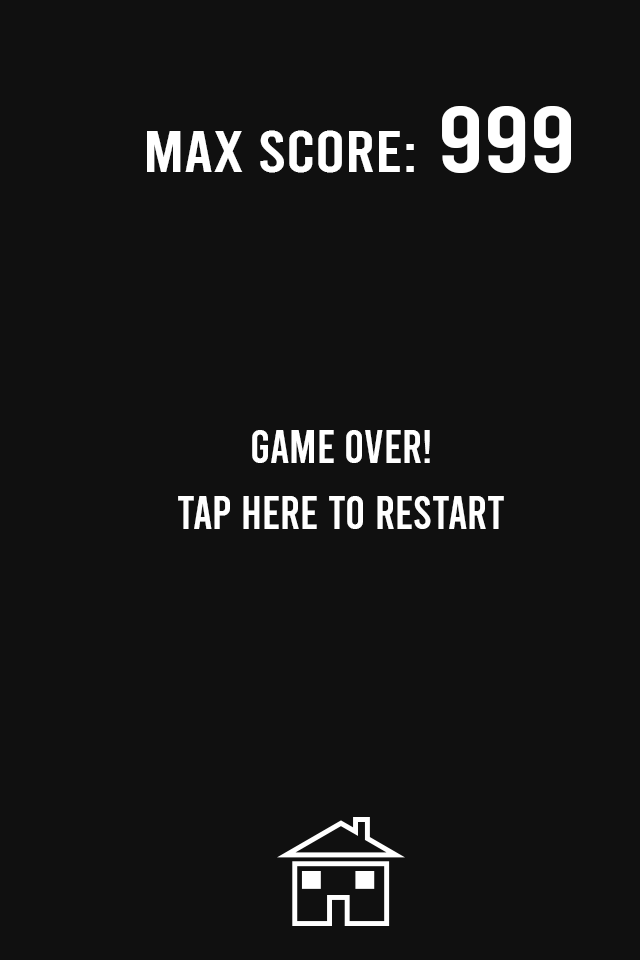
<style>
.page{position:relative;width:640px;height:960px;background:#101010}
.page>*{position:absolute;margin:0}
.t1{font:93.3px "Bebas-Regular";color:#ffffff;scale:1.17 1}
.t2{font:58.9px "Bebas-Regular";color:#ffffff;scale:1.17 1}
.t3{font:46.2px/32.8px "Bebas-Regular";color:#ffffff}
</style>
<div class="page">
<p class="t1" style="left:442px;top:106px;width:129px;height:67px">999</p>
<p class="t2" style="left:147px;top:130px;width:267px;height:43px">max score:</p>
<p class="t3" style="left:178px;top:430px;width:326px;height:99px;text-align:center">GAME OVER!<br><br>tap HERE to restart</p>
</div>
